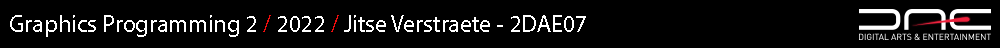
<style>
.page{position:relative;width:1000px;height:48px;background:#000000}
.page>*{position:absolute;margin:0}
.t1{font:24px "MyriadPro-Regular";color:#ffffff}
.t2{font:24px "MyriadPro-Regular";color:#f00e0e}
</style>
<div class="page">
<p class="t1" style="left:10px;top:15px;width:576px;height:22px">Graphics Programming 2 <span class="t2">/</span> 2022 <span class="t2">/</span> Jitse Verstraete - 2DAE07</p>
</div>
